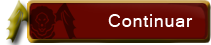
<style>
.page{position:relative;width:211px;height:45px;background:#650600}
.page>*{position:absolute;margin:0}
.t1{font:18px "MicrosoftSansSerif";letter-spacing:0.04em;color:#ffffff}
</style>
<div class="page">
<p class="t1" style="left:108px;top:14px;width:85px;height:13px">Continuar</p>
</div>
